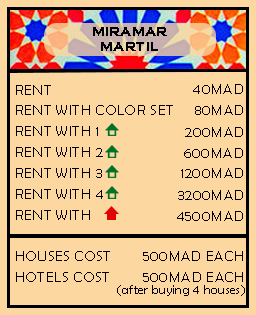
<style>
.page{position:relative;width:256px;height:315px;background:#fcd7a0}
.page>*{position:absolute;margin:0}
.t1{font:12.5px "CopperplateGothic-Bold";letter-spacing:0.025em;color:#000000}
.t2{font:14.6px/20.8px "BerlinSansFB-Reg";letter-spacing:0.025em;color:#000000}
.t3{font:14.6px "BerlinSansFB-Reg";letter-spacing:0.025em;color:#000000}
.t4{font:12.5px "BerlinSansFB-Reg";letter-spacing:0.025em;color:#000000}
</style>
<div class="page">
<p class="t1" style="left:93px;top:27px;width:74px;height:24px;text-align:center">MIRAMAR<br>MARTIL</p>
<p class="t2" style="left:16px;top:85px;width:157px;height:197px">RENT                                <br>RENT WITH COLOR SET    <br>RENT WITH 1                    <br>RENT WITH 2                   <br>RENT WITH 3                  <br>RENT WITH 4                 <br>RENT WITH                    <br><br>HOUSES COST      <br>HOTELS COST</p>
<p class="t3" style="left:193px;top:84px;width:50px;height:10px">40MAD</p>
<p class="t3" style="left:195px;top:105px;width:48px;height:10px">80MAD</p>
<p class="t3" style="left:185px;top:127px;width:58px;height:10px">200MAD</p>
<p class="t3" style="left:184px;top:148px;width:59px;height:10px">600MAD</p>
<p class="t3" style="left:181px;top:168px;width:62px;height:10px">1200MAD</p>
<p class="t3" style="left:178px;top:190px;width:65px;height:10px">3200MAD</p>
<p class="t3" style="left:177px;top:211px;width:66px;height:10px">4500MAD</p>
<p class="t3" style="left:143px;top:251px;width:100px;height:10px">500MAD EACH</p>
<p class="t3" style="left:143px;top:272px;width:100px;height:10px">500MAD EACH</p>
<p class="t4" style="left:117px;top:285px;width:128px;height:11px">(after buying 4 houses)</p>
</div>
